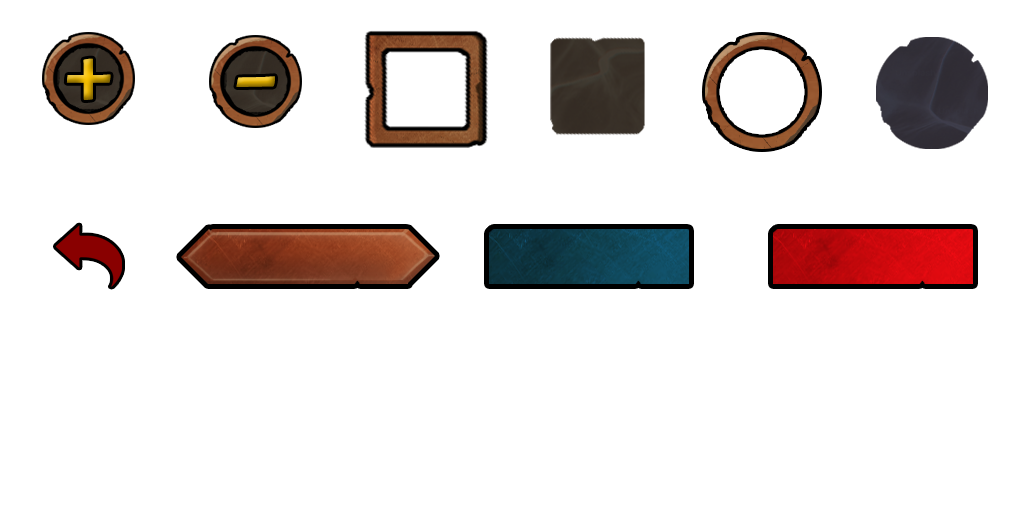
<style>
.page{position:relative;width:1024px;height:512px;background:#ffffff}
.page>*{position:absolute;margin:0}
.t1{font:72px "Hahmlet-Black"}
.t2{font:72px "Hahmlet-Black";scale:1.54 1}
</style>
<div class="page">
<p class="t1" style="left:66px;top:58px;width:45px;height:42px">+</p>
<p class="t2" style="left:236px;top:76px;width:39px;height:11px;rotate:-1deg">-</p>
</div>
